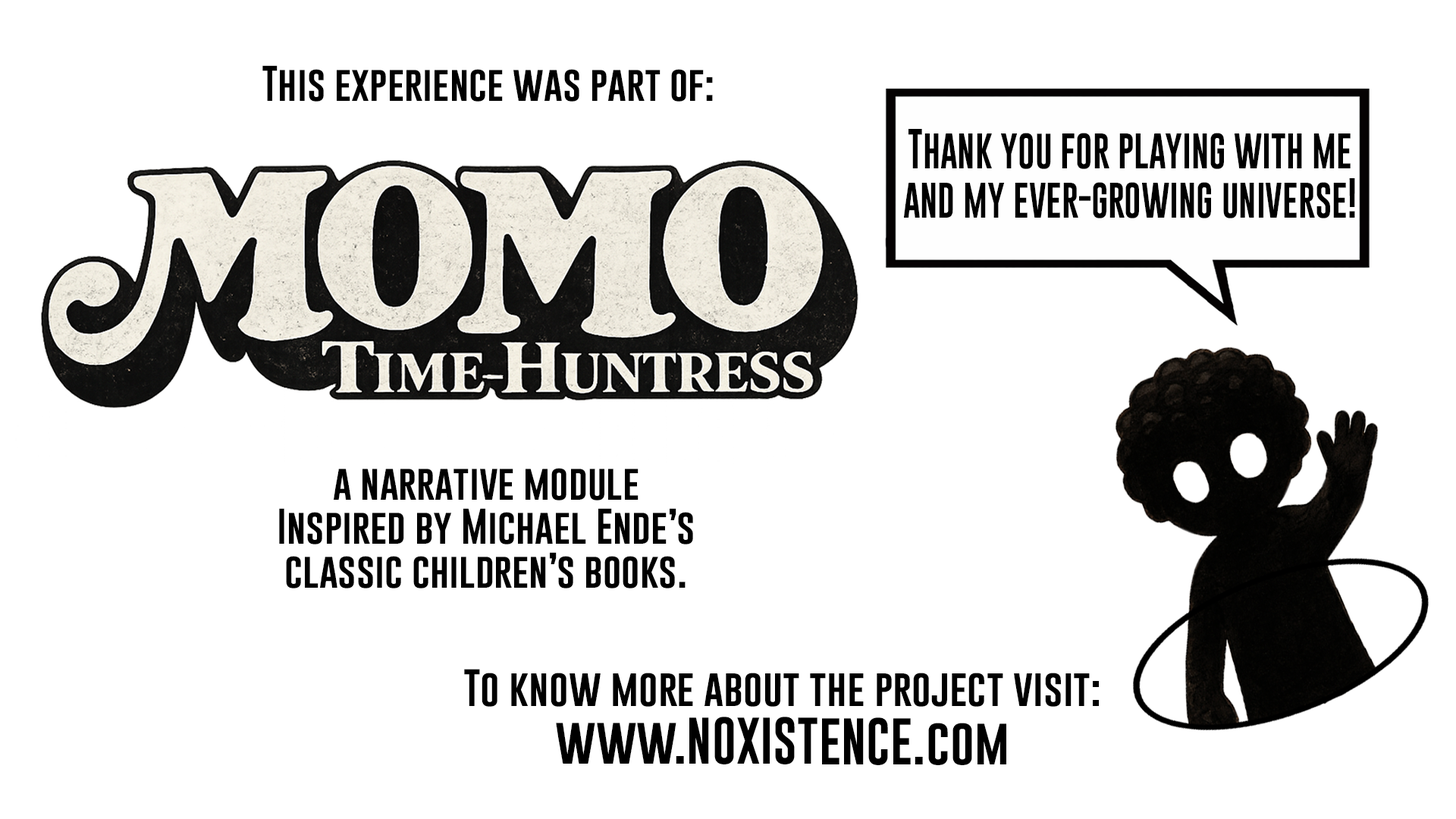
<style>
.page{position:relative;width:1456px;height:819px;background:#ffffff}
.page>*{position:absolute;margin:0}
.t1{font:36.5px "Gobold";color:#000000}
.t2{font:41.1px "Gobold";color:#000000;scale:0.82 1}
.t3{font:38.5px "Gobold";color:#000000}
.t4{font:48.2px "Gobold";color:#000000}
</style>
<div class="page">
<p class="t1" style="left:262px;top:65px;width:451px;height:37px">This experience was part of:</p>
<p class="t2" style="left:904px;top:129px;width:451px;height:89px;text-align:center">Thank you for playing with me <br>and my ever-growing universe!</p>
<p class="t1" style="left:279px;top:468px;width:414px;height:120px;text-align:center">a narrative module<br>Inspired by Michael Ende’s <br>classic children’s books.</p>
<p class="t3" style="left:464px;top:669px;width:635px;height:96px;text-align:center">To know more about the project visit:<br><span class="t4">www.NOXISTENCE.com</span></p>
</div>
